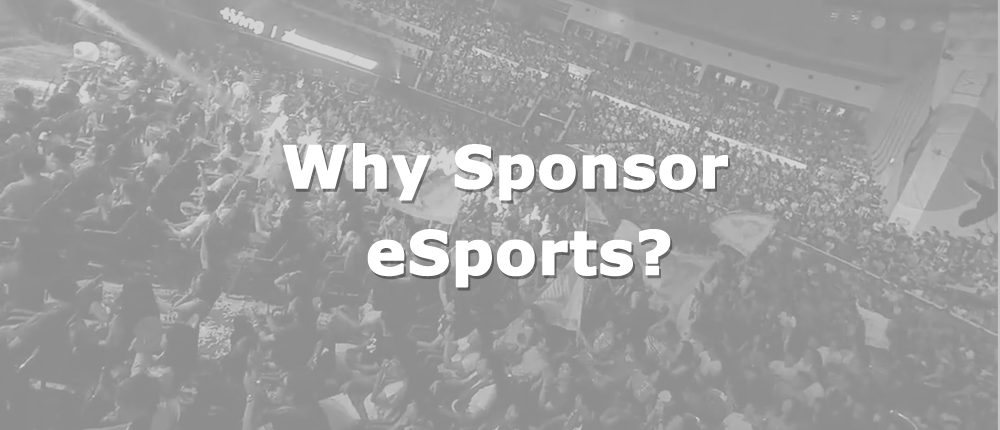
<style>
.page{position:relative;width:1000px;height:430px}
.page>*{position:absolute;margin:0}
.t1{font:58px "Verdana-Bold";color:#ffffff;font-weight:bold}
.t2{font:60px "Verdana-Bold";color:#ffffff;font-weight:bold}
</style>
<div class="page">
<p class="t1" style="left:283px;top:143px;width:445px;height:58px">Why Sponsor</p>
<p class="t2" style="left:367px;top:229px;width:304px;height:59px">eSports?</p>
</div>
